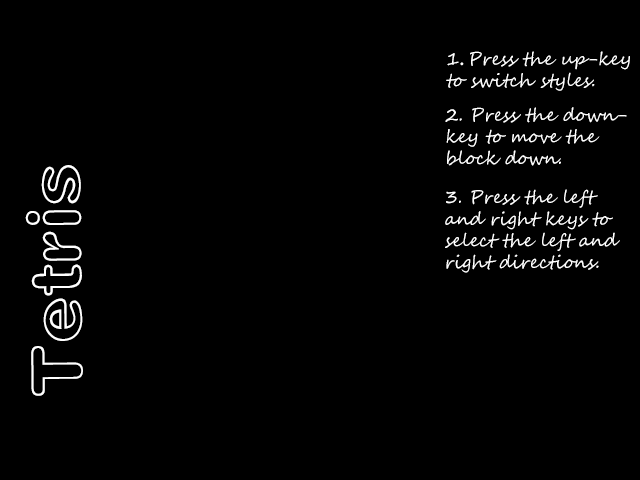
<style>
.page{position:relative;width:640px;height:480px;background:#000000}
.page>*{position:absolute;margin:0}
.t1{font:18px "SegoeScript";color:#ffffff}
.t2{font:18px "AdobeHeitiStd-Regular";color:#ffffff}
.t3{font:73.3px "HGKY_CNKI";color:#ffffff}
</style>
<div class="page">
<p class="t1" style="left:446px;top:51px;width:184px;height:40px">1<span class="t2">. </span>Press the up-key <br>to switch styles.</p>
<p class="t1" style="left:445px;top:107px;width:182px;height:59px">2. Press the down-<br>key to move the <br>block down.</p>
<p class="t3" style="left:25px;top:165px;width:58px;height:231px;rotate:-91deg">Tetris</p>
<p class="t1" style="left:445px;top:189px;width:175px;height:84px">3. Press the left <br>and right keys to <br>select the left and <br>right directions.</p>
</div>
